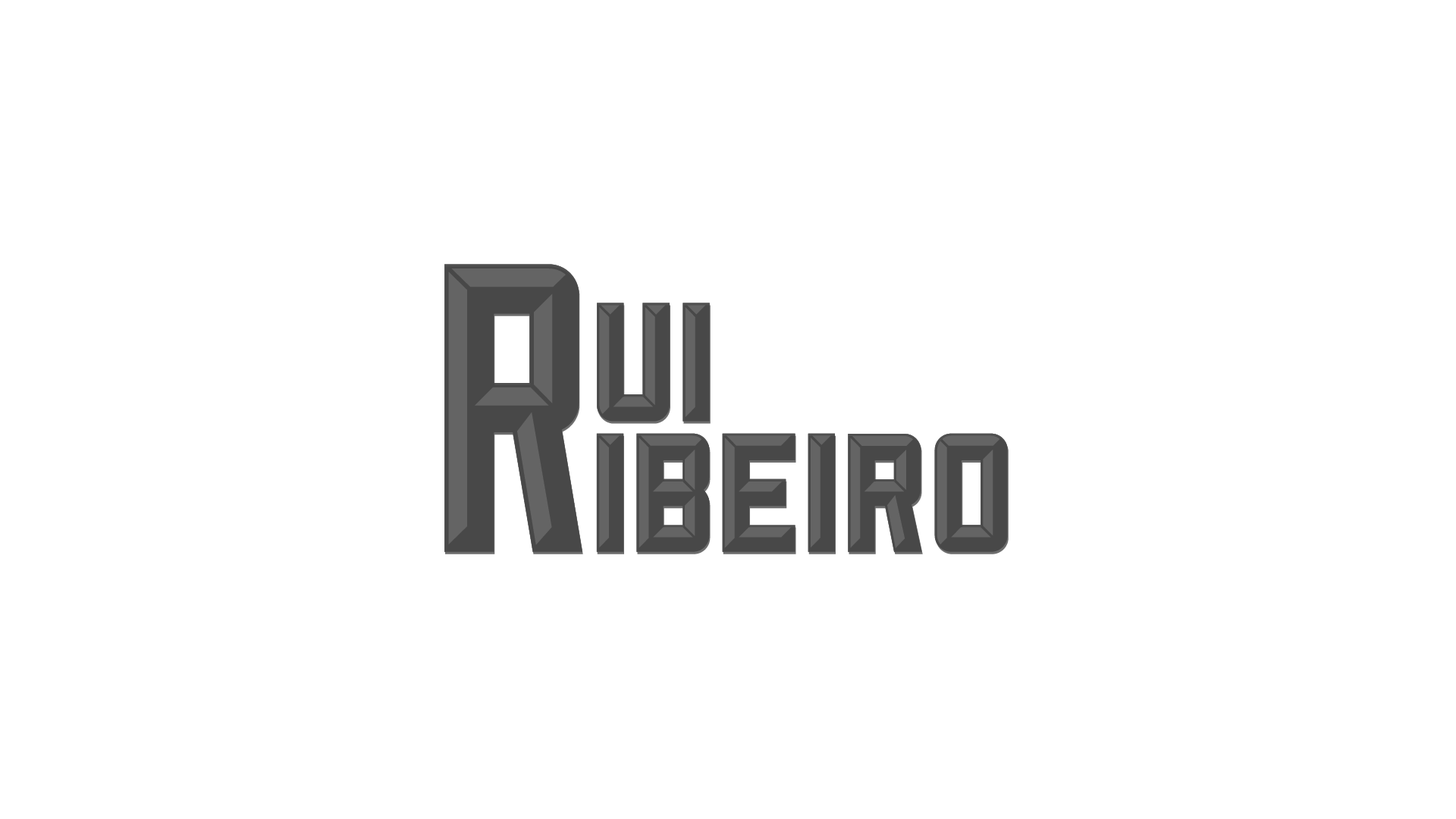
<style>
.page{position:relative;width:1456px;height:819px;background:#ffffff}
.page>*{position:absolute;margin:0}
.t1{font:410.8px "Sullivan-Fill"}
.t2{font:410.8px "Sullivan-Bevel";color:#484848}
.t3{font:221.2px "Sullivan-Fill"}
.t4{font:221.2px "Sullivan-Bevel";color:#484848}
</style>
<div class="page">
<p class="t1" style="left:444px;top:264px;width:138px;height:288px">R</p>
<p class="t2" style="left:444px;top:264px;width:138px;height:288px">R</p>
<p class="t2" style="left:444px;top:264px;width:138px;height:288px">R</p>
<p class="t1" style="left:445px;top:266px;width:138px;height:288px">R</p>
<p class="t3" style="left:597px;top:303px;width:113px;height:119px">ui</p>
<p class="t4" style="left:597px;top:303px;width:113px;height:119px">ui</p>
<p class="t4" style="left:597px;top:303px;width:113px;height:119px">ui</p>
<p class="t3" style="left:598px;top:305px;width:113px;height:119px">ui</p>
<p class="t3" style="left:596px;top:433px;width:412px;height:119px">ibeiro</p>
<p class="t4" style="left:597px;top:433px;width:411px;height:119px">ibeiro</p>
<p class="t4" style="left:597px;top:433px;width:411px;height:119px">ibeiro</p>
<p class="t3" style="left:597px;top:435px;width:412px;height:119px">ibeiro</p>
</div>
